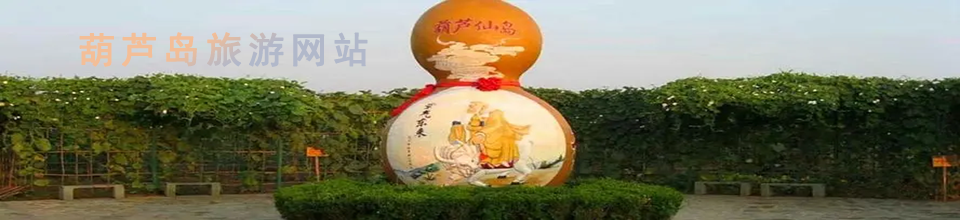
<style>
.page{position:relative;width:960px;height:220px}
.page>*{position:absolute;margin:0}
.t1{font:36px "SimHei";letter-spacing:0.15em;font-weight:bold}
</style>
<div class="page">
<p class="t1" style="left:79px;top:32px;width:289px;height:35px">葫芦岛旅游网站</p>
</div>
